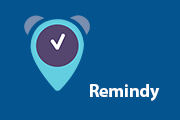
<style>
.page{position:relative;width:180px;height:120px;background:#04558f}
.page>*{position:absolute;margin:0}
.t1{font:18px "MyriadPro-Bold";color:#ffffff}
</style>
<div class="page">
<p class="t1" style="left:90px;top:84px;width:70px;height:17px">Remindy</p>
</div>
